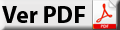
<style>
.page{position:relative;width:120px;height:30px;background:#e9e8e8}
.page>*{position:absolute;margin:0}
.t1{font:24px "MyriadPro-Bold";color:#000000}
</style>
<div class="page">
<p class="t1" style="left:2px;top:6px;width:83px;height:17px">Ver PDF</p>
</div>
